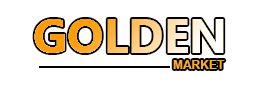
<style>
.page{position:relative;width:260px;height:86px;background:#ffffff}
.page>*{position:absolute;margin:0}
.t1{font:48px "Gisha-Bold"}
.t2{font:12px "Arial-BoldMT";color:#ffac2a}
</style>
<div class="page">
<p class="t1" style="left:34px;top:19px;width:190px;height:34px">GOLDEN</p>
<p class="t2" style="left:173px;top:60px;width:52px;height:9px">MARKET</p>
</div>
